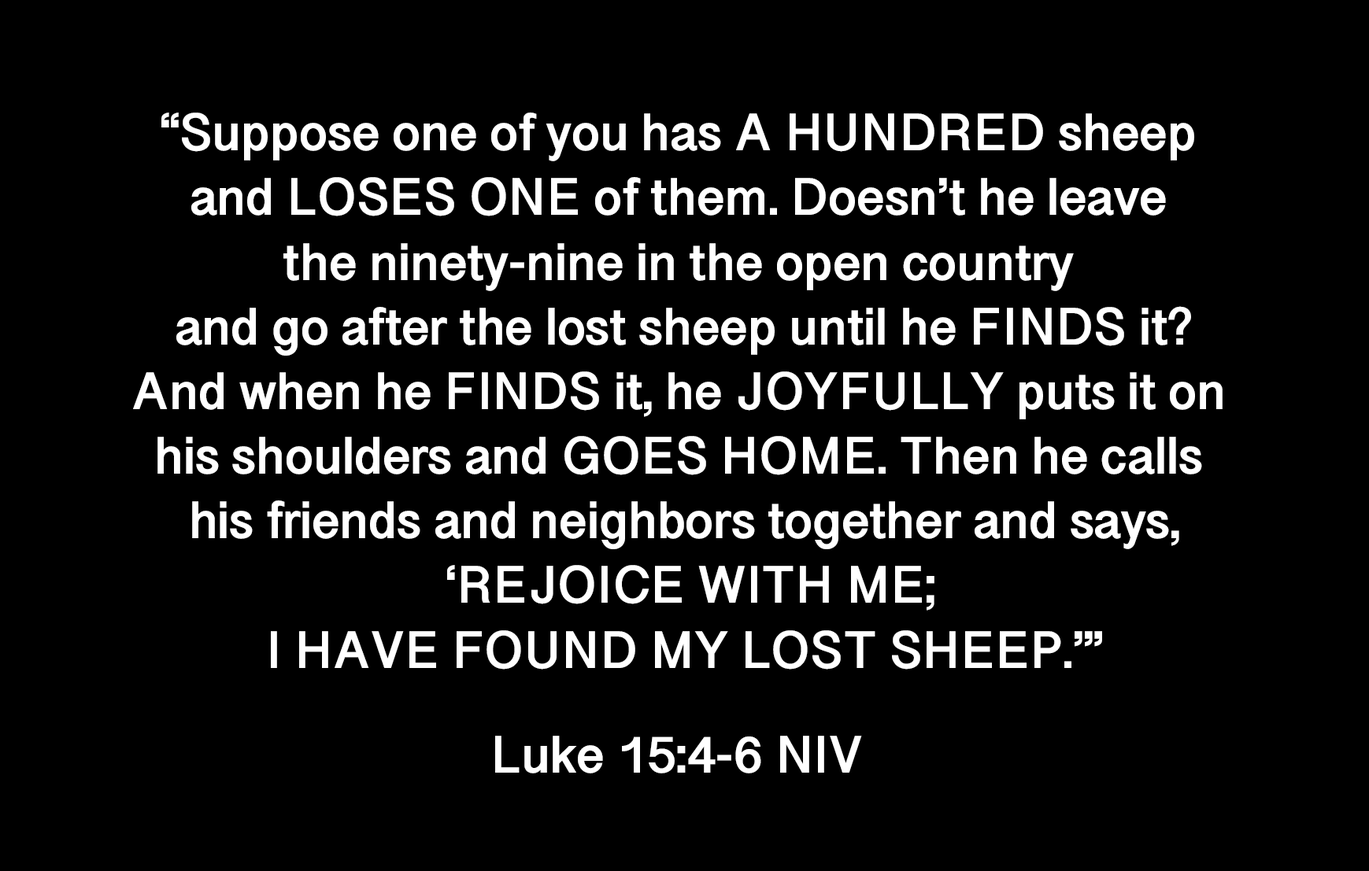
<style>
.page{position:relative;width:1369px;height:871px;background:#000000}
.page>*{position:absolute;margin:0}
.t1{font:53.9px "SinhalaSangamMN-Bold";color:#ffffff}
</style>
<div class="page">
<p class="t1" style="left:133px;top:113px;width:1089px;height:557px;text-align:center">“Suppose one of you has A HUNDRED sheep <br>and LOSES ONE of them. Doesn’t he leave <br>the ninety-nine in the open country <br>and go after the lost sheep until he FINDS it?<br>And when he FINDS it, he JOYFULLY puts it on <br>his shoulders and GOES HOME. Then he calls <br>his friends and neighbors together and says,<br> ‘REJOICE WITH ME;<br>I HAVE FOUND MY LOST SHEEP.’”</p>
<p class="t1" style="left:495px;top:736px;width:367px;height:38px">Luke 15:4-6 NIV</p>
</div>
